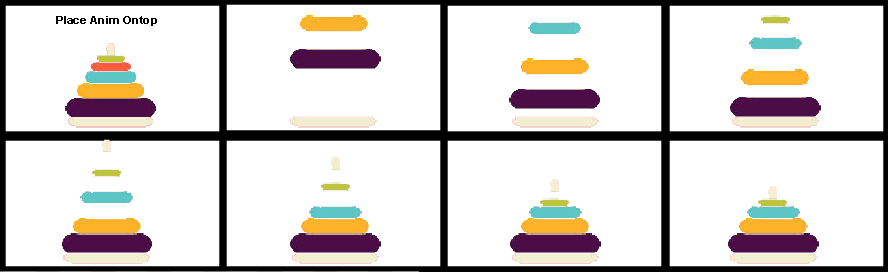
<style>
.page{position:relative;width:888px;height:272px;background:#ffffff}
.page>*{position:absolute;margin:0}
.t1{font:11.1px "Arial-BoldMT";color:#000000;scale:1.06 1}
</style>
<div class="page">
<p class="t1" style="left:56px;top:16px;width:101px;height:10px">Place Anim Ontop</p>
</div>
